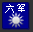
<style>
.page{position:relative;width:33px;height:32px;background:#000090}
.page>*{position:absolute;margin:0}
.t1{font:10.4px "SimSun";color:#ffffff}
</style>
<div class="page">
<p class="t1" style="left:5px;top:4px;width:20px;height:9px">六军</p>
</div>
